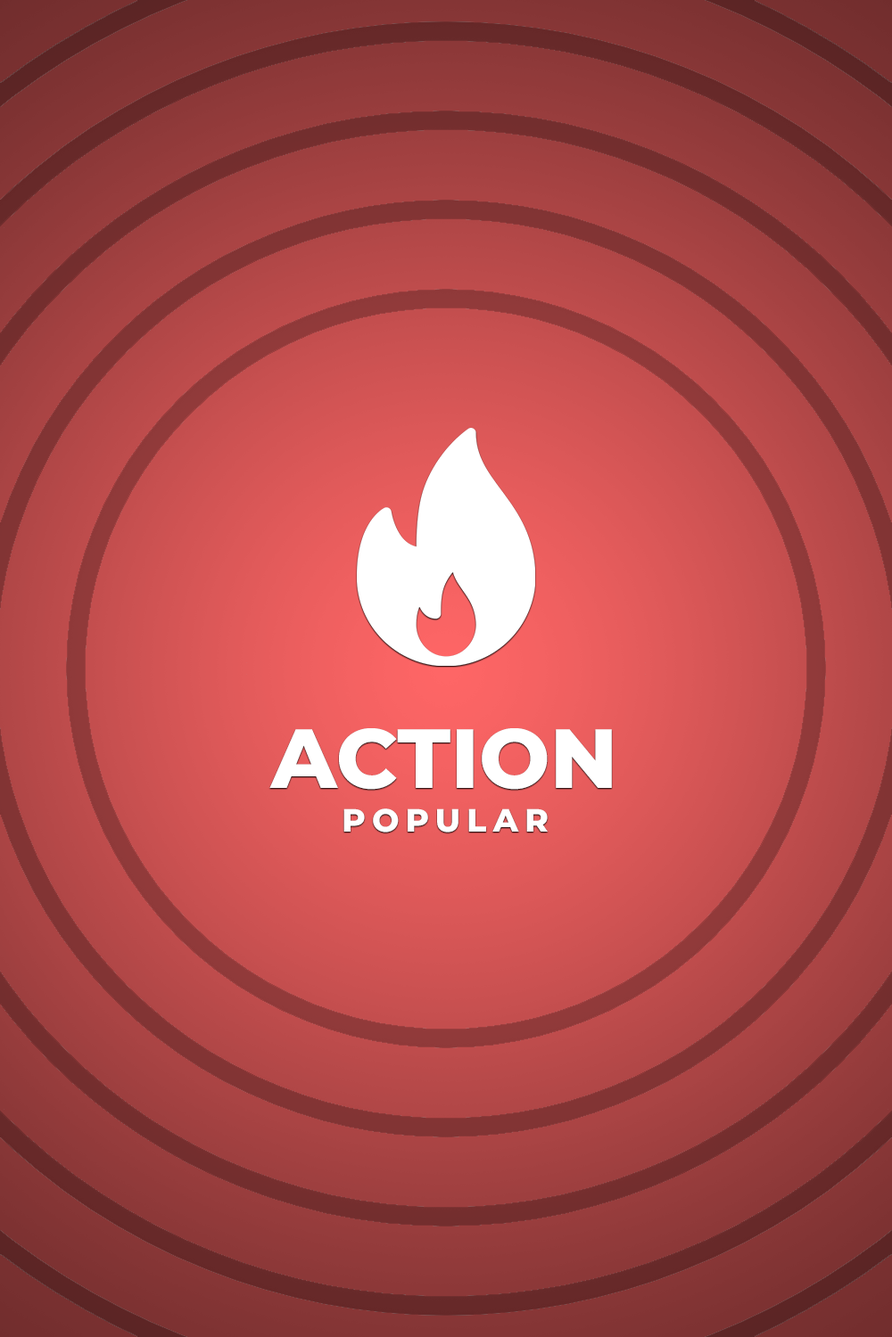
<style>
.page{position:relative;width:892px;height:1337px}
.page>*{position:absolute;margin:0}
.t1{font:83.8px "MontserratRoman-ExtraBold";color:#ffffff}
.t2{font:32.1px "MontserratRoman-ExtraBold";letter-spacing:0.2em;color:#ffffff}
</style>
<div class="page">
<p class="t1" style="left:269px;top:728px;width:343px;height:62px">ACTION</p>
<p class="t2" style="left:343px;top:809px;width:204px;height:24px">POPULAR</p>
</div>
